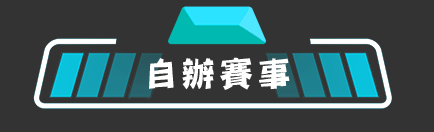
<style>
.page{position:relative;width:434px;height:132px;background:#333333}
.page>*{position:absolute;margin:0}
.t1{font:34.2px "DFPingJu-W7-WINP-BF";letter-spacing:0.1em;color:#ffffff}
</style>
<div class="page">
<p class="t1" style="left:149px;top:57px;width:141px;height:33px">自辦賽事</p>
</div>
